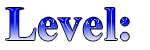
<style>
.page{position:relative;width:150px;height:50px;background:#ffffff}
.page>*{position:absolute;margin:0}
.t1{font:48px "TimesNewRomanPS-BoldMT"}
</style>
<div class="page">
<p class="t1" style="left:6px;top:8px;width:123px;height:33px">Level:</p>
</div>
